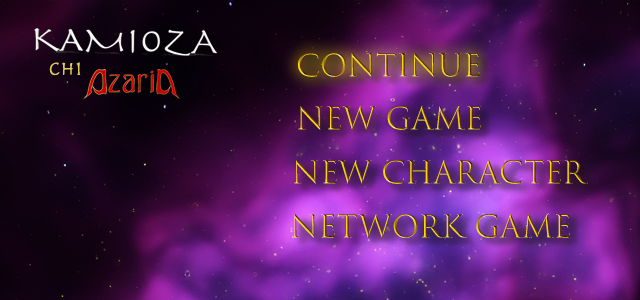
<style>
.page{position:relative;width:640px;height:300px}
.page>*{position:absolute;margin:0}
.t1{font:30px "TrajanColor-Concept"}
</style>
<div class="page">
<p class="t1" style="left:298px;top:53px;width:182px;height:24px">Continue</p>
<p class="t1" style="left:298px;top:105px;width:184px;height:25px">New Game</p>
<p class="t1" style="left:294px;top:159px;width:294px;height:25px">New Character</p>
<p class="t1" style="left:292px;top:214px;width:278px;height:24px">Network game</p>
</div>
